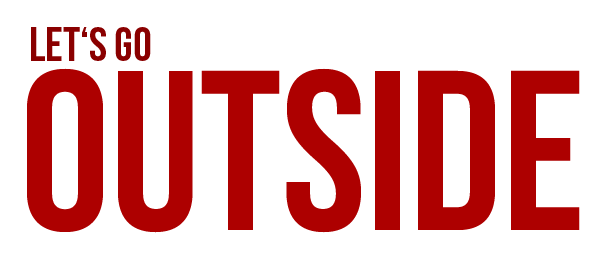
<style>
.page{position:relative;width:600px;height:260px;background:#ffffff}
.page>*{position:absolute;margin:0}
.t1{font:48.1px "BebasNeue";color:#8a0000}
.t2{font:226.9px "BebasNeue";color:#ad0000}
</style>
<div class="page">
<p class="t1" style="left:31px;top:27px;width:120px;height:34px">Let‘s go</p>
<p class="t2" style="left:27px;top:68px;width:553px;height:165px">OUTSIDE</p>
</div>
